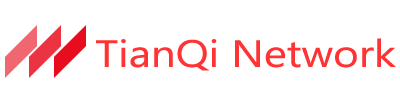
<style>
.page{position:relative;width:400px;height:100px;background:#ffffff}
.page>*{position:absolute;margin:0}
.t1{font:38px "SegoeUI";color:#ff3333;scale:1.15 1}
</style>
<div class="page">
<p class="t1" style="left:96px;top:38px;width:300px;height:33px">TianQi Network</p>
</div>
